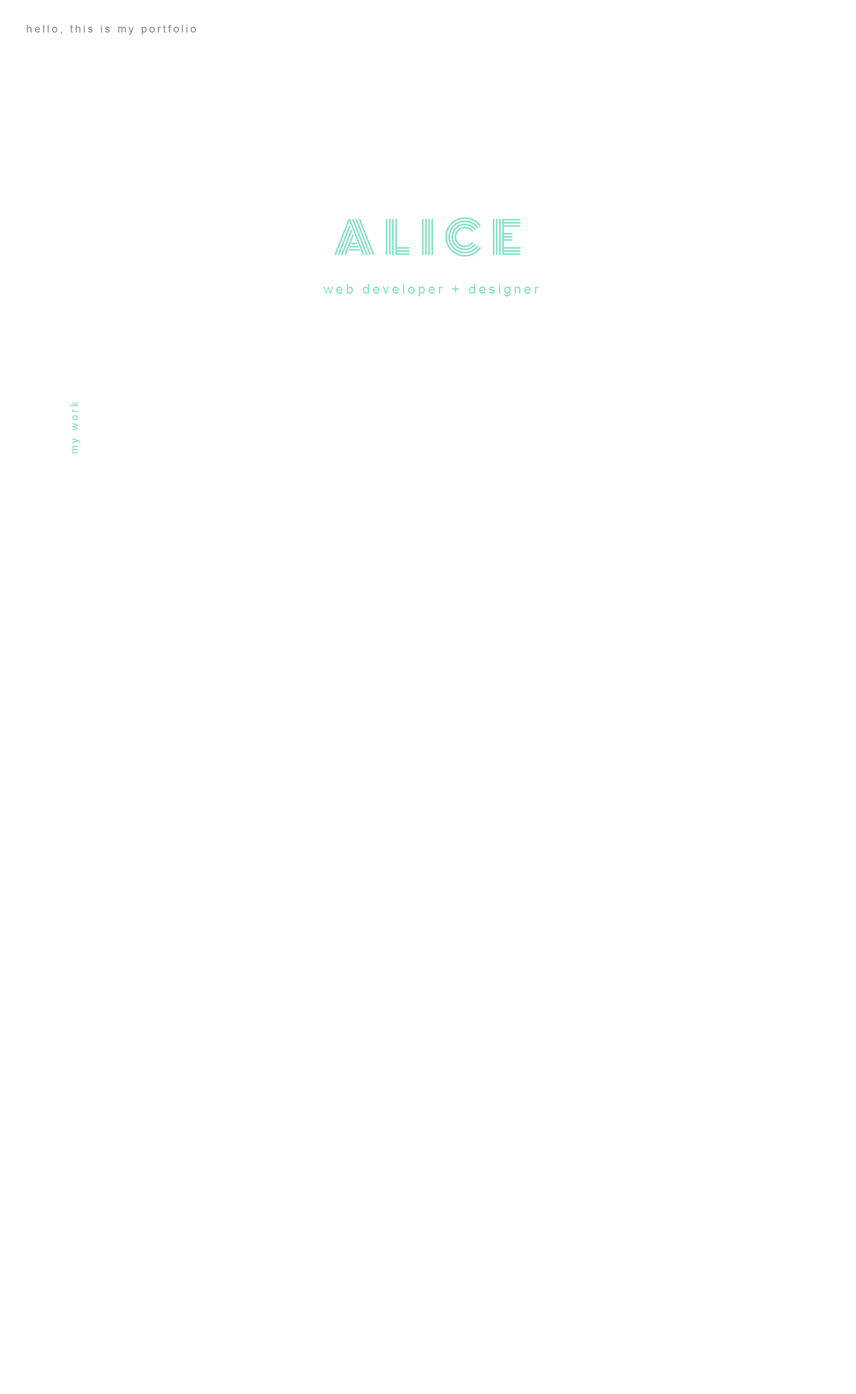
<style>
.page{position:relative;width:856px;height:1394px;background:#ffffff}
.page>*{position:absolute;margin:0}
.t1{font:10.7px "ArialMT";letter-spacing:0.2em;color:#8d8d8d}
.t2{font:44.6px "Monoton-Regular";letter-spacing:0.2em;color:#81e3c4}
.t3{font:13.4px "ArialMT";letter-spacing:0.2em;color:#81e3c4}
.t4{font:10.7px "ArialMT";letter-spacing:0.2em;color:#81e3c4}
</style>
<div class="page">
<p class="t1" style="left:27px;top:25px;width:169px;height:10px">hello, this is my portfolio</p>
<p class="t2" style="left:334px;top:217px;width:186px;height:40px">ALICE</p>
<p class="t3" style="left:323px;top:284px;width:216px;height:12px">web developer + designer</p>
<p class="t4" style="left:70px;top:401px;width:10px;height:53px;rotate:-90deg">my work</p>
</div>
